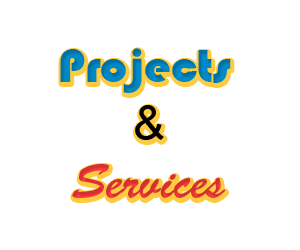
<style>
.page{position:relative;width:300px;height:250px;background:#ffffff}
.page>*{position:absolute;margin:0}
.t1{font:48px "Bauhaus93"}
.t2{font:48px "ArialMT"}
.t3{font:48px "BrushScriptStd"}
</style>
<div class="page">
<p class="t1" style="left:60px;top:48px;width:171px;height:150px;text-align:center">Projects <br><span class="t2">&amp;<br></span><span class="t3">Services</span></p>
</div>
